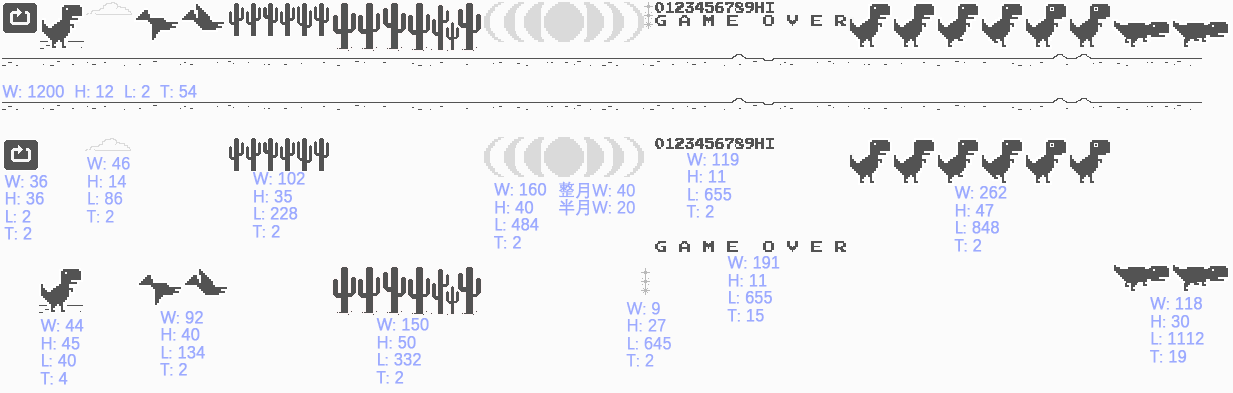
<style>
.page{position:relative;width:1233px;height:393px;background:#fbfbfb}
.page>*{position:absolute;margin:0}
.t1{font:16.7px "DengXian-Regular";color:#9caaff;font-weight:bold}
.t2{font:16.7px/17.5px "DengXian-Regular";color:#9caaff;font-weight:bold}
</style>
<div class="page">
<p class="t1" style="left:2px;top:85px;width:195px;height:13px">W: 1200  H: 12  L: 2  T: 54</p>
<p class="t2" style="left:86px;top:157px;width:44px;height:66px">W: 46<br>H: 14<br>L: 86<br>T: 2</p>
<p class="t2" style="left:686px;top:153px;width:53px;height:65px">W: 119<br>H: 11<br>L: 655<br>T: 2</p>
<p class="t2" style="left:252px;top:172px;width:53px;height:66px">W: 102<br>H: 35<br>L: 228<br>T: 2</p>
<p class="t2" style="left:4px;top:175px;width:44px;height:65px">W: 36<br>H: 36<br>L: 2<br>T: 2</p>
<p class="t2" style="left:494px;top:183px;width:53px;height:66px">W: 160<br>H: 40<br>L: 484<br>T: 2</p>
<p class="t2" style="left:559px;top:181px;width:76px;height:35px">整月W: 40<br>半月W: 20</p>
<p class="t2" style="left:954px;top:186px;width:53px;height:66px">W: 262<br>H: 47<br>L: 848<br>T: 2</p>
<p class="t2" style="left:727px;top:256px;width:53px;height:66px">W: 191<br>H: 11<br>L: 655<br>T: 15</p>
<p class="t2" style="left:626px;top:302px;width:45px;height:65px">W: 9<br>H: 27<br>L: 645<br>T: 2</p>
<p class="t2" style="left:1150px;top:297px;width:54px;height:66px">W: 118<br>H: 30<br>L: 1112<br>T: 19</p>
<p class="t2" style="left:160px;top:311px;width:45px;height:65px">W: 92<br>H: 40<br>L: 134<br>T: 2</p>
<p class="t2" style="left:376px;top:318px;width:53px;height:66px">W: 150<br>H: 50<br>L: 332<br>T: 2</p>
<p class="t2" style="left:40px;top:319px;width:44px;height:66px">W: 44<br>H: 45<br>L: 40<br>T: 4</p>
</div>
